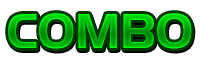
<style>
.page{position:relative;width:200px;height:60px;background:#ffffff}
.page>*{position:absolute;margin:0}
.t1{font:47.4px "HandelGothicBT-Regular"}
</style>
<div class="page">
<p class="t1" style="left:8px;top:13px;width:184px;height:36px">COMBO</p>
</div>
